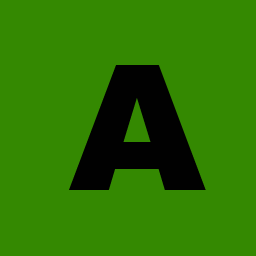
<style>
.page{position:relative;width:256px;height:256px;background:#348901}
.page>*{position:absolute;margin:0}
.t1{font:174.7px "Arial-Black";color:#010101}
</style>
<div class="page">
<p class="t1" style="left:69px;top:65px;width:137px;height:125px">A</p>
</div>
